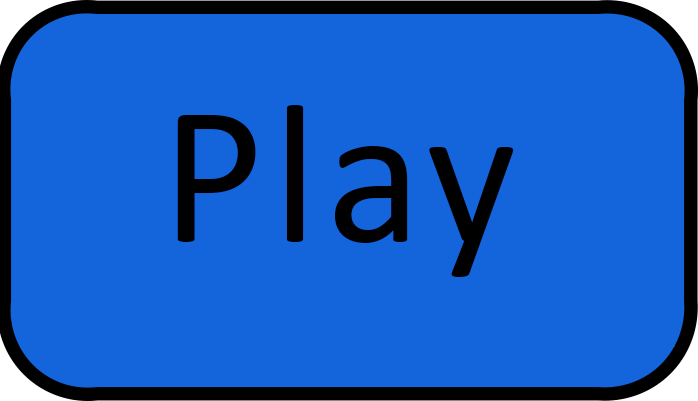
<style>
.page{position:relative;width:698px;height:401px;background:#1464dc}
.page>*{position:absolute;margin:0}
.t1{font:200px "Calibri";letter-spacing:0.04em;color:#000000}
</style>
<div class="page">
<p class="t1" style="left:177px;top:105px;width:337px;height:172px">Play</p>
</div>
